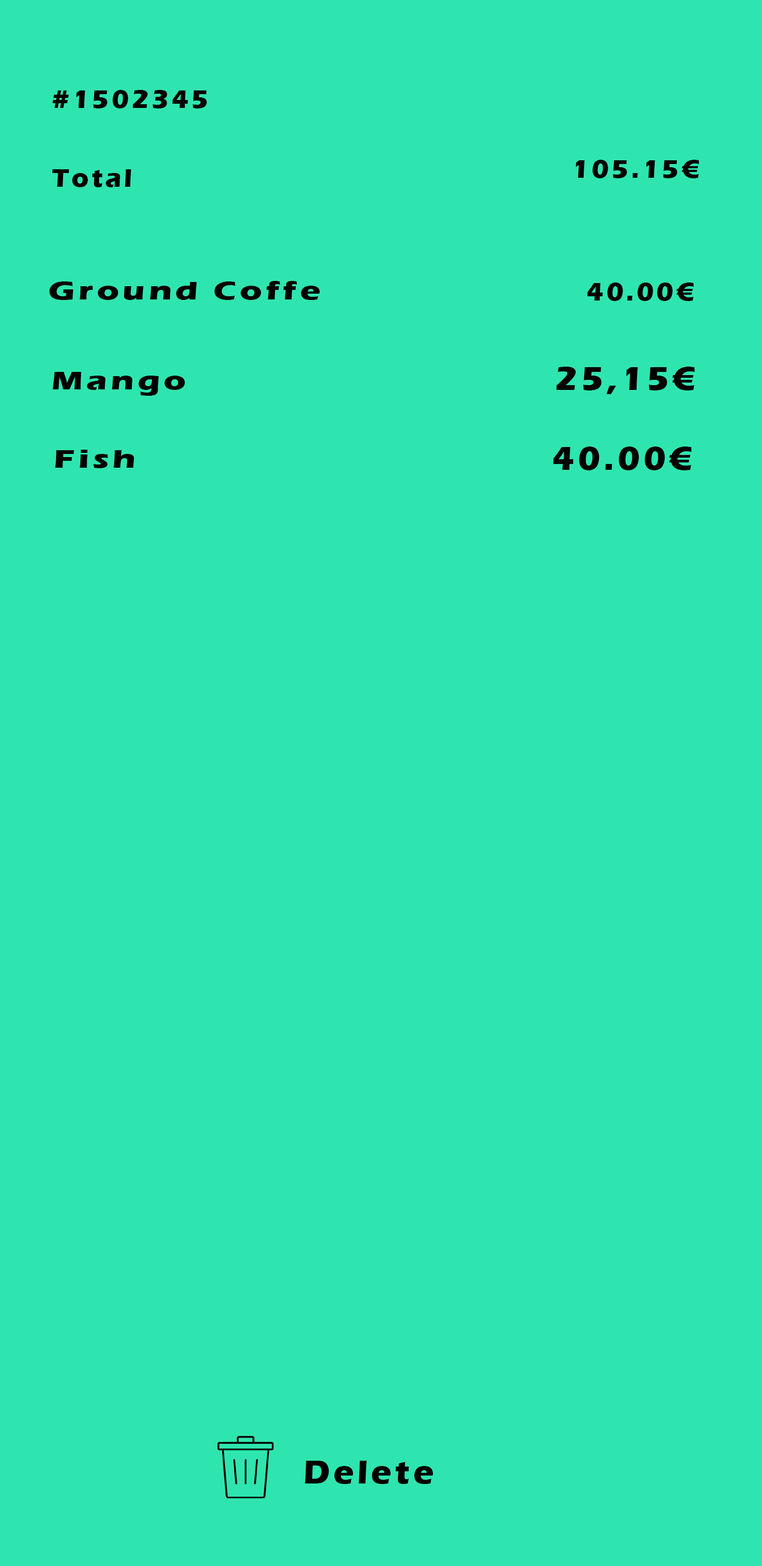
<style>
.page{position:relative;width:762px;height:1566px;background:#2fe5af}
.page>*{position:absolute;margin:0}
.t1{font:26.4px "ErasITC-Bold";letter-spacing:0.1em;color:#000000}
.t2{font:26.4px "ErasITC-Bold";letter-spacing:0.1em;color:#000000;scale:1.3 1}
.t3{font:34.4px "ErasITC-Bold";letter-spacing:0.1em;color:#000000}
</style>
<div class="page">
<p class="t1" style="left:52px;top:90px;width:155px;height:18px">#1502345</p>
<p class="t1" style="left:575px;top:160px;width:124px;height:18px">105.15€</p>
<p class="t1" style="left:52px;top:169px;width:79px;height:18px">Total</p>
<p class="t2" style="left:49px;top:281px;width:271px;height:19px">Ground Coffe</p>
<p class="t1" style="left:587px;top:282px;width:106px;height:19px">40.00€</p>
<p class="t2" style="left:52px;top:372px;width:133px;height:24px">Mango</p>
<p class="t3" style="left:556px;top:367px;width:138px;height:27px">25,15€</p>
<p class="t2" style="left:55px;top:450px;width:79px;height:18px">Fish</p>
<p class="t3" style="left:553px;top:446px;width:138px;height:24px">40.00€</p>
<p class="t3" style="left:305px;top:1460px;width:128px;height:24px">Delete</p>
</div>
